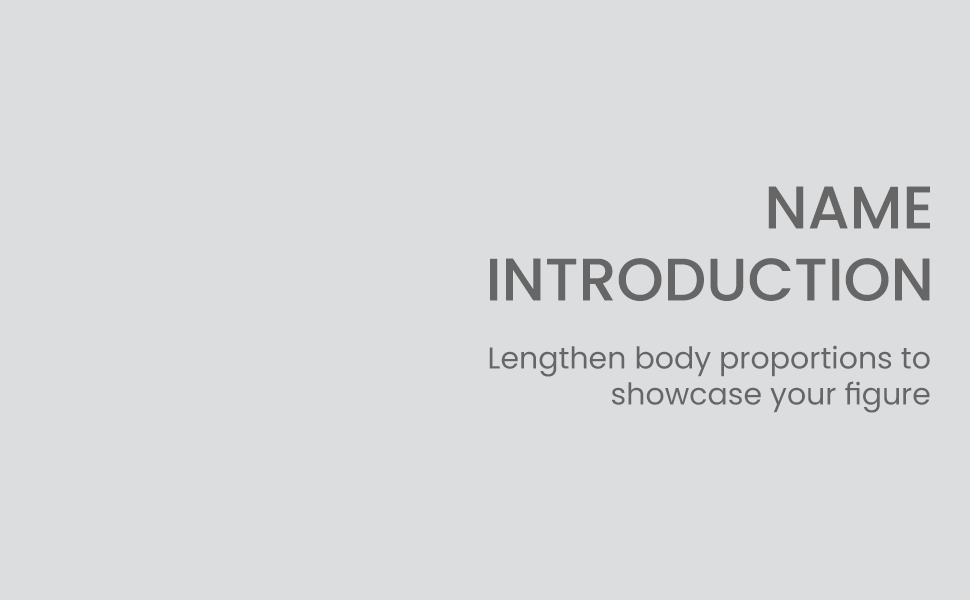
<style>
.page{position:relative;width:970px;height:600px;background:#dcdddf}
.page>*{position:absolute;margin:0}
.t1{font:60px "Poppins-Medium";color:#666666}
.t2{font:30px "Poppins-Regular";color:#666666}
</style>
<div class="page">
<p class="t1" style="left:490px;top:186px;width:440px;height:115px;text-align:right">NAME<br>INTRODUCTION</p>
<p class="t2" style="left:489px;top:345px;width:441px;height:68px;text-align:right">Lengthen body proportions to<br>showcase your figure</p>
</div>
